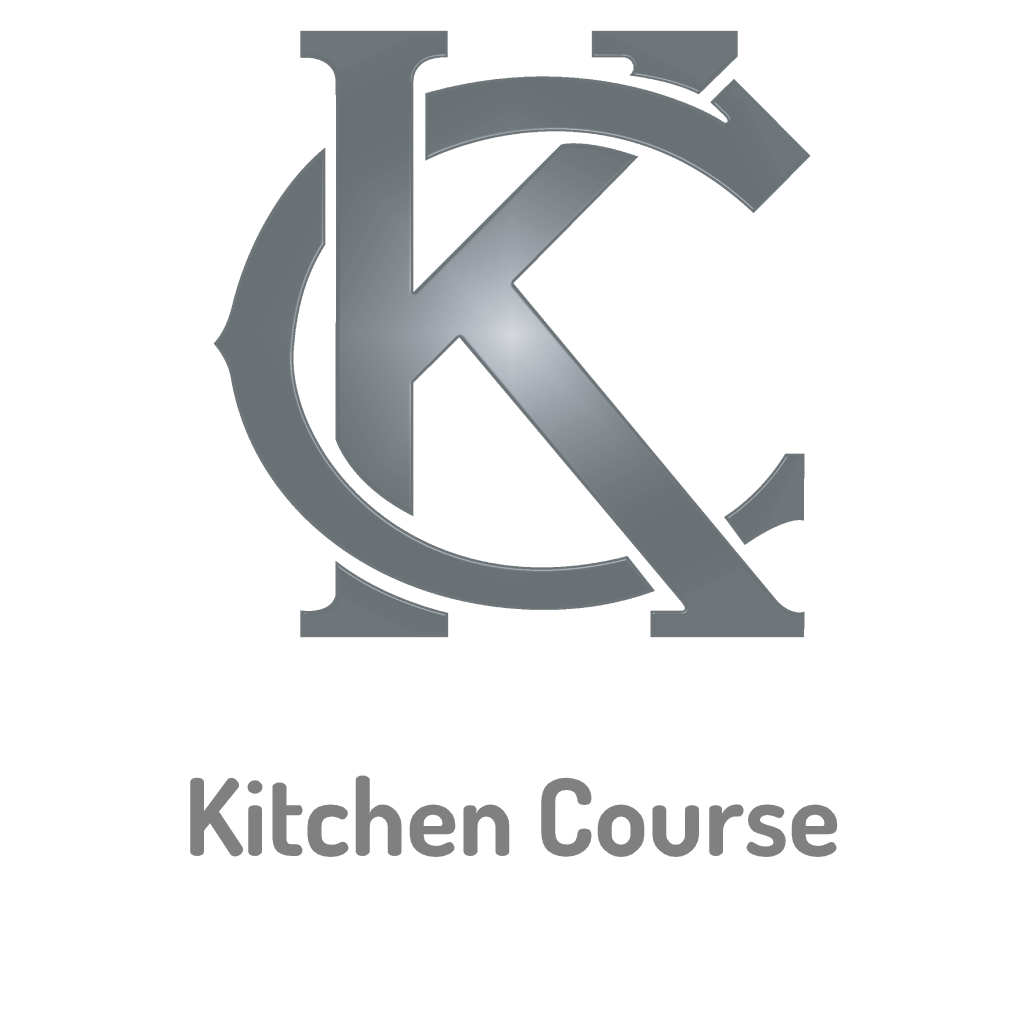
<style>
.page{position:relative;width:1024px;height:1024px;background:#ffffff}
.page>*{position:absolute;margin:0}
.t1{font:107px "Dosis-Bold";color:#808080}
</style>
<div class="page">
<p class="t1" style="left:190px;top:775px;width:648px;height:82px">Kitchen Course</p>
</div>
